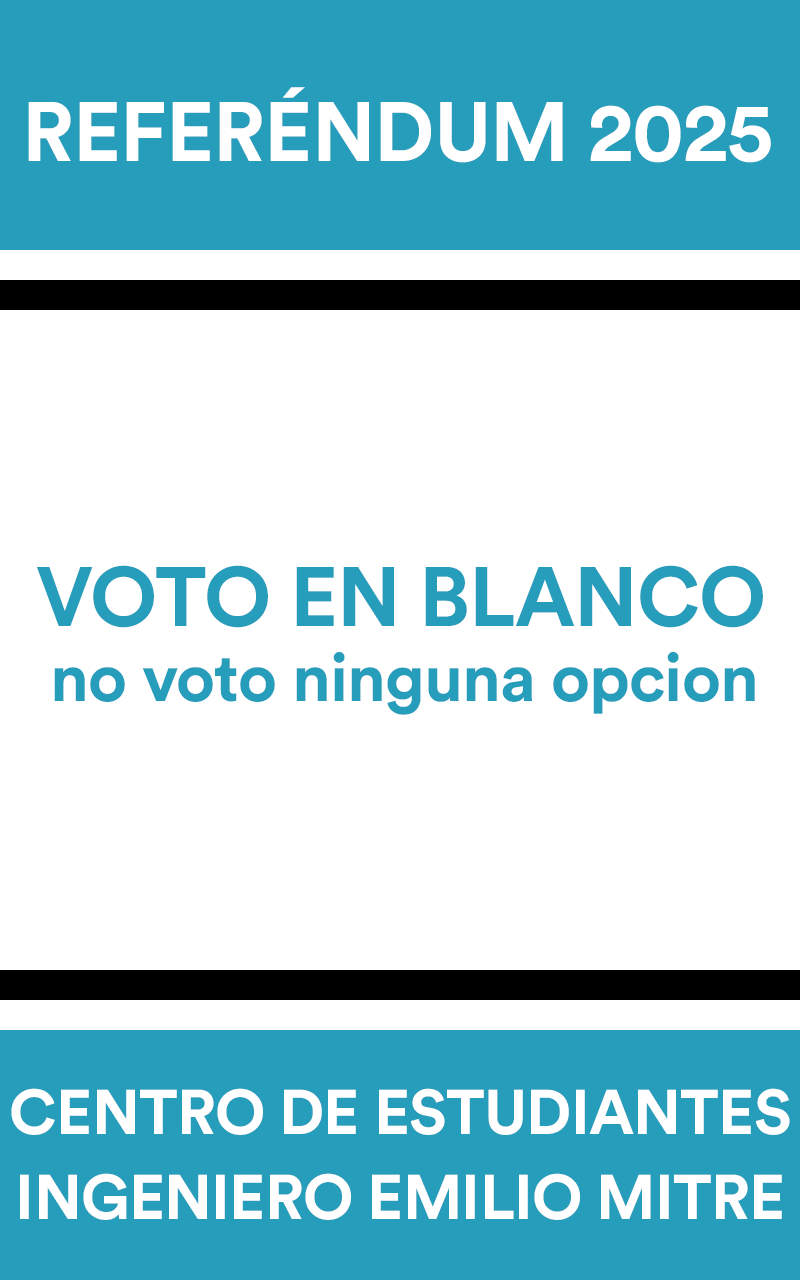
<style>
.page{position:relative;width:800px;height:1280px;background:#ffffff}
.page>*{position:absolute;margin:0}
.t1{font:83.3px "CircularStd-Bold";letter-spacing:-0.013em;color:#ffffff}
.t2{font:83.3px "CircularStd-Bold";letter-spacing:-0.013em;color:#269dbb}
.t3{font:66.7px "CircularStd-Bold";letter-spacing:-0.013em;color:#269dbb}
.t4{font:62.5px/85.8px "CircularStd-Bold";letter-spacing:-0.013em;color:#ffffff}
</style>
<div class="page">
<p class="t1" style="left:28px;top:87px;width:743px;height:76px">REFERÉNDUM 2025</p>
<p class="t2" style="left:37px;top:565px;width:726px;height:63px">VOTO EN BLANCO</p>
<p class="t3" style="left:54px;top:651px;width:701px;height:64px">no voto ninguna opcion</p>
<p class="t4" style="left:11px;top:1088px;width:779px;height:132px;text-align:center">CENTRO DE ESTUDIANTES<br>INGENIERO EMILIO MITRE</p>
</div>
